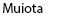
<style>
.page{position:relative;width:64px;height:16px;background:#ffffff}
.page>*{position:absolute;margin:0}
.t1{font:14px "MyriadPro-Regular";color:#000000}
</style>
<div class="page">
<p class="t1" style="left:3px;top:3px;width:40px;height:10px">Muiota</p>
</div>
